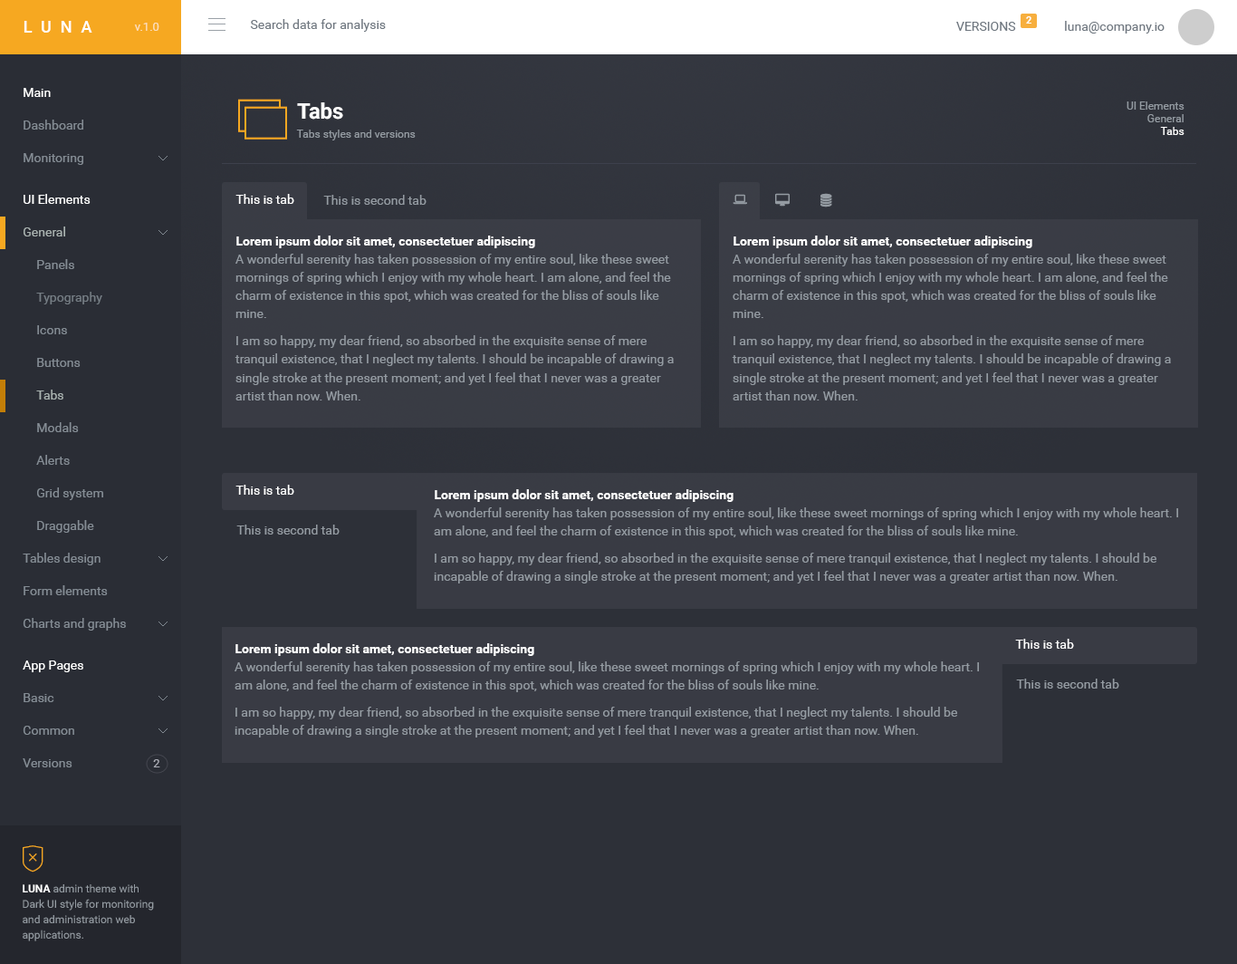
<style>
.page{position:relative;width:1237px;height:964px;background:#2d3038}
.page>*{position:absolute;margin:0}
.t1{font:10px "Roboto-Bold";color:#ffffff}
.t2{font:16.3px "Roboto-Medium";letter-spacing:0.55em;color:#ffffff}
.t3{font:11.8px "Roboto-Regular";color:#fbdfbc}
.t4{font:12.7px "Roboto-Regular";color:#6f7780}
.t5{font:12.7px "Roboto-Regular";color:#ffffff}
.t6{font:10.9px/12.7px "Roboto-Regular";color:#949ba2}
.t7{font:10.9px/12.7px "Roboto-Regular";color:#ffffff}
.t8{font:21.7px "Roboto-Bold";color:#ffffff}
.t9{font:12.7px "Roboto-Regular";color:#848c94}
.t10{font:10.9px "Roboto-Regular";color:#949ba2}
.t11{font:12.7px "Roboto-Regular";color:#949ba2}
.t12{font:12.7px "Roboto-Regular";color:#a9b2b0}
.t13{font:12.7px "Roboto-Bold";color:#ffffff}
.t14{font:12.7px/18.1px "Roboto-Regular";color:#949ba2}
.t15{font:12.7px "Roboto-Regular";color:#757d84}
.t16{font:11.8px "Roboto-Regular";color:#aaacb5}
.t17{font:10.9px/15.4px "Roboto-Regular";color:#949ba2}
.t18{font:10.9px/15.4px "Roboto-Bold";color:#ffffff}
</style>
<div class="page">
<p class="t1" style="left:1026px;top:16px;width:6px;height:8px">2</p>
<p class="t2" style="left:24px;top:21px;width:68px;height:12px">LUNA</p>
<p class="t3" style="left:134px;top:23px;width:25px;height:8px">v.1.0</p>
<p class="t4" style="left:250px;top:19px;width:136px;height:13px">Search data for analysis</p>
<p class="t4" style="left:956px;top:22px;width:60px;height:9px">VERSIONS</p>
<p class="t4" style="left:1065px;top:21px;width:100px;height:13px">luna@company.io</p>
<p class="t5" style="left:24px;top:88px;width:27px;height:9px">Main</p>
<p class="t6" style="left:1127px;top:101px;width:58px;height:34px;text-align:right">UI Elements<br>General<br><span class="t7">Tabs</span></p>
<p class="t8" style="left:297px;top:102px;width:46px;height:18px">Tabs</p>
<p class="t9" style="left:24px;top:120px;width:59px;height:10px">Dashboard</p>
<p class="t10" style="left:296px;top:130px;width:120px;height:10px">Tabs styles and versions</p>
<p class="t9" style="left:24px;top:153px;width:59px;height:12px">Monitoring</p>
<p class="t5" style="left:24px;top:194px;width:67px;height:10px">UI Elements</p>
<p class="t5" style="left:236px;top:194px;width:58px;height:10px">This is tab</p>
<p class="t11" style="left:323px;top:195px;width:104px;height:10px">This is second tab</p>
<p class="t12" style="left:24px;top:226px;width:41px;height:10px">General</p>
<p class="t13" style="left:236px;top:236px;width:299px;height:12px">Lorem ipsum dolor sit amet, consectetuer adipiscing</p>
<p class="t13" style="left:734px;top:236px;width:299px;height:12px">Lorem ipsum dolor sit amet, consectetuer adipiscing</p>
<p class="t14" style="left:235px;top:254px;width:439px;height:146px">A wonderful serenity has taken possession of my entire soul, like these sweet mornings of spring which I enjoy with my whole heart. I am alone, and feel the charm of existence in this spot, which was created for the bliss of souls like mine.<br><br>I am so happy, my dear friend, so absorbed in the exquisite sense of mere tranquil existence, that I neglect my talents. I should be incapable of drawing a single stroke at the present moment; and yet I feel that I never was a greater artist than now. When.</p>
<p class="t14" style="left:732px;top:254px;width:439px;height:146px">A wonderful serenity has taken possession of my entire soul, like these sweet mornings of spring which I enjoy with my whole heart. I am alone, and feel the charm of existence in this spot, which was created for the bliss of souls like mine.<br><br>I am so happy, my dear friend, so absorbed in the exquisite sense of mere tranquil existence, that I neglect my talents. I should be incapable of drawing a single stroke at the present moment; and yet I feel that I never was a greater artist than now. When.</p>
<p class="t9" style="left:37px;top:259px;width:37px;height:10px">Panels</p>
<p class="t15" style="left:36px;top:292px;width:66px;height:12px">Typography</p>
<p class="t9" style="left:37px;top:325px;width:30px;height:9px">Icons</p>
<p class="t9" style="left:37px;top:358px;width:44px;height:9px">Buttons</p>
<p class="t12" style="left:36px;top:389px;width:27px;height:10px">Tabs</p>
<p class="t9" style="left:37px;top:422px;width:42px;height:10px">Modals</p>
<p class="t9" style="left:36px;top:455px;width:34px;height:10px">Alerts</p>
<p class="t5" style="left:236px;top:485px;width:58px;height:10px">This is tab</p>
<p class="t9" style="left:37px;top:487px;width:66px;height:13px">Grid system</p>
<p class="t13" style="left:435px;top:489px;width:299px;height:13px">Lorem ipsum dolor sit amet, consectetuer adipiscing</p>
<p class="t14" style="left:434px;top:507px;width:744px;height:76px">A wonderful serenity has taken possession of my entire soul, like these sweet mornings of spring which I enjoy with my whole heart. I am alone, and feel the charm of existence in this spot, which was created for the bliss of souls like mine.<br><br>I am so happy, my dear friend, so absorbed in the exquisite sense of mere tranquil existence, that I neglect my talents. I should be incapable of drawing a single stroke at the present moment; and yet I feel that I never was a greater artist than now. When.</p>
<p class="t9" style="left:37px;top:520px;width:57px;height:13px">Draggable</p>
<p class="t11" style="left:236px;top:524px;width:104px;height:10px">This is second tab</p>
<p class="t9" style="left:23px;top:553px;width:78px;height:12px">Tables design</p>
<p class="t9" style="left:24px;top:585px;width:84px;height:10px">Form elements</p>
<p class="t9" style="left:23px;top:618px;width:103px;height:12px">Charts and graphs</p>
<p class="t5" style="left:1015px;top:639px;width:59px;height:10px">This is tab</p>
<p class="t13" style="left:236px;top:643px;width:298px;height:13px">Lorem ipsum dolor sit amet, consectetuer adipiscing</p>
<p class="t5" style="left:23px;top:660px;width:60px;height:12px">App Pages</p>
<p class="t14" style="left:235px;top:661px;width:744px;height:76px">A wonderful serenity has taken possession of my entire soul, like these sweet mornings of spring which I enjoy with my whole heart. I am alone, and feel the charm of existence in this spot, which was created for the bliss of souls like mine.<br><br>I am so happy, my dear friend, so absorbed in the exquisite sense of mere tranquil existence, that I neglect my talents. I should be incapable of drawing a single stroke at the present moment; and yet I feel that I never was a greater artist than now. When.</p>
<p class="t11" style="left:1016px;top:678px;width:104px;height:10px">This is second tab</p>
<p class="t9" style="left:24px;top:693px;width:30px;height:9px">Basic</p>
<p class="t9" style="left:23px;top:726px;width:51px;height:9px">Common</p>
<p class="t9" style="left:23px;top:758px;width:49px;height:9px">Versions</p>
<p class="t16" style="left:153px;top:759px;width:7px;height:8px">2</p>
<p class="t17" style="left:23px;top:884px;width:131px;height:57px"><span class="t18">LUNA </span>admin theme with Dark UI style for monitoring and administration web applications.</p>
</div>
